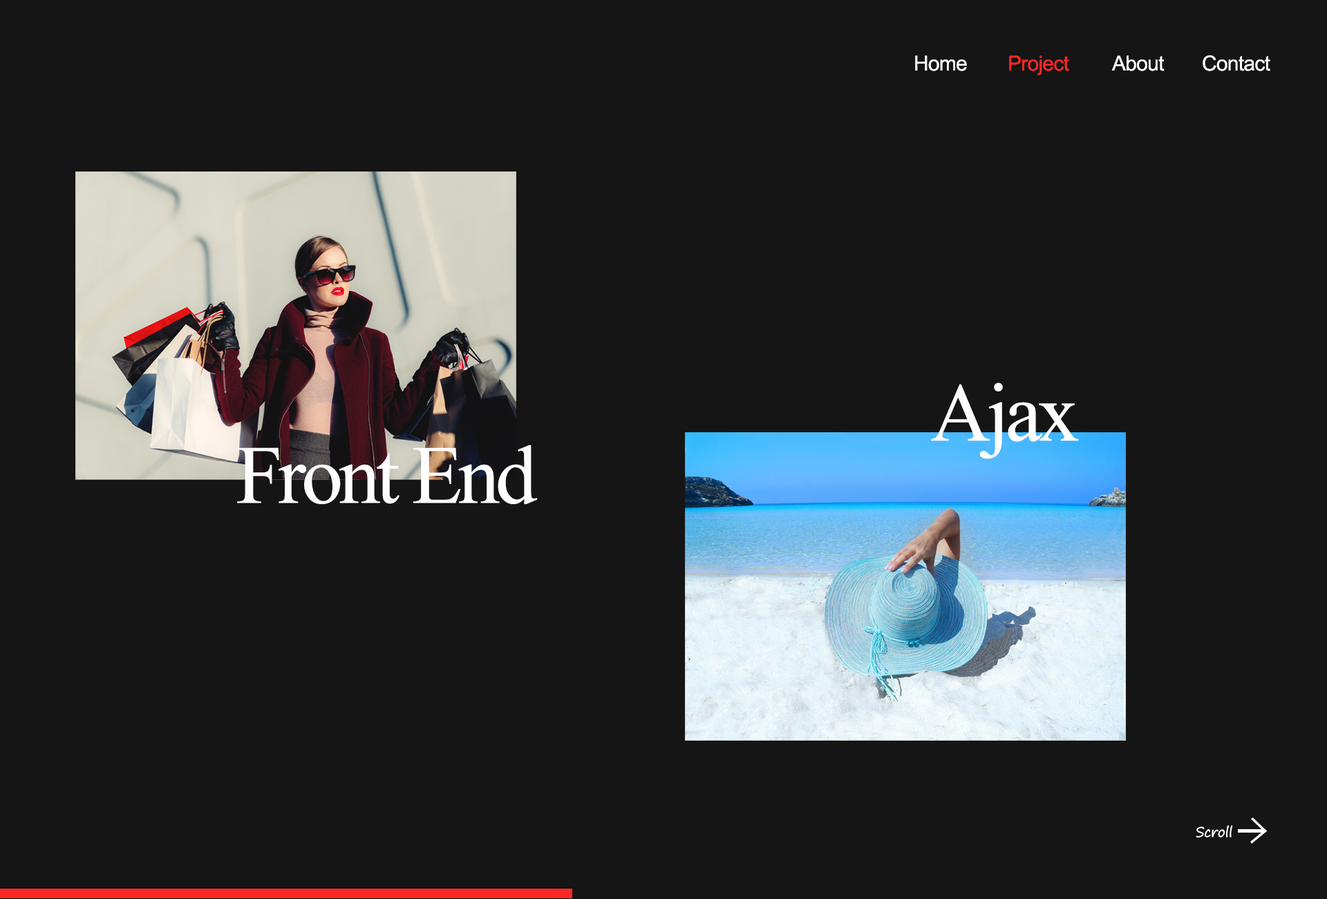
<style>
.page{position:relative;width:1327px;height:899px;background:#151515}
.page>*{position:absolute;margin:0}
.t1{font:20.7px "ArialMT";letter-spacing:-0.025em;color:#fefefe}
.t2{font:20.7px "ArialMT";letter-spacing:-0.025em;color:#fe2827}
.t3{font:20.7px "ArialMT";letter-spacing:-0.025em;color:#ffffff}
.t4{font:82.9px "TimesNewRomanPSMT";letter-spacing:-0.05em;color:#fdfdfd}
.t5{font:13.8px "SegoePrint";letter-spacing:-0.025em;color:#ffffff}
</style>
<div class="page">
<p class="t1" style="left:915px;top:55px;width:52px;height:16px">Home</p>
<p class="t2" style="left:1009px;top:55px;width:60px;height:20px">Project</p>
<p class="t3" style="left:1111px;top:55px;width:54px;height:16px">About</p>
<p class="t3" style="left:1203px;top:55px;width:67px;height:16px">Contact</p>
<p class="t4" style="left:931px;top:382px;width:148px;height:77px">Ajax</p>
<p class="t4" style="left:237px;top:444px;width:301px;height:60px">Front End</p>
<p class="t5" style="left:1196px;top:825px;width:37px;height:12px">Scroll</p>
</div>
